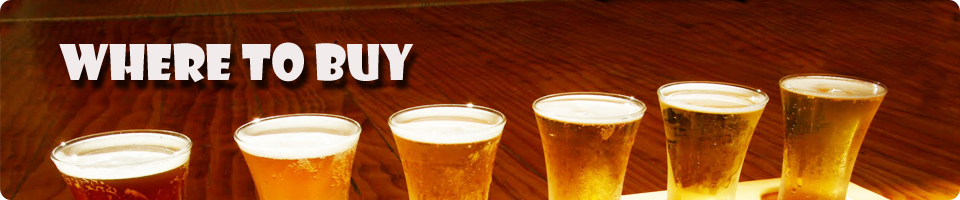
<style>
.page{position:relative;width:960px;height:200px}
.page>*{position:absolute;margin:0}
.t1{font:48px "ShowcardGothic-Reg";color:#f1ebeb}
</style>
<div class="page">
<p class="t1" style="left:59px;top:42px;width:355px;height:41px">WHERE TO BUY</p>
</div>
